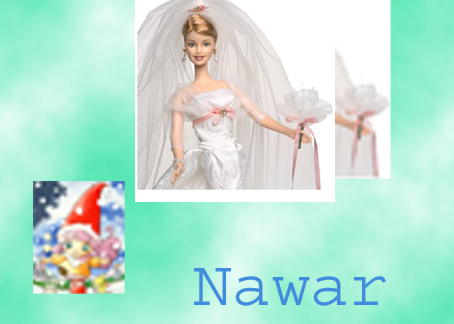
<style>
.page{position:relative;width:454px;height:324px}
.page>*{position:absolute;margin:0}
.t1{font:64.8px "Courier";color:#428cde}
.t2{font:43.2px "Courier";color:#428cde}
</style>
<div class="page">
<p class="t1" style="left:194px;top:268px;width:192px;height:38px"><span class="t2">    <br>    </span> Nawar</p>
</div>
